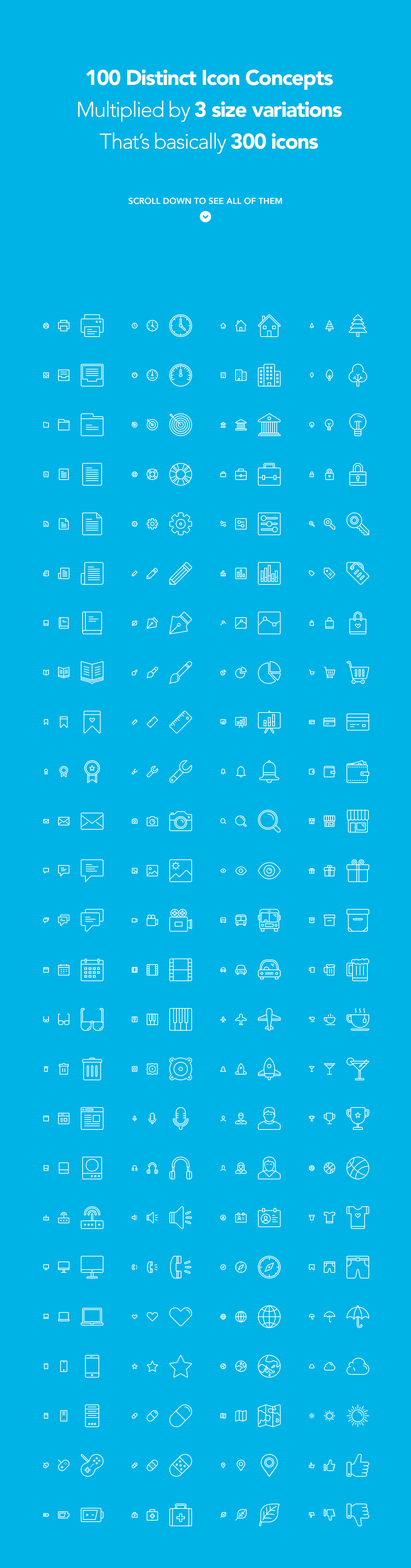
<style>
.page{position:relative;width:411px;height:1568px;background:#00b3e7}
.page>*{position:absolute;margin:0}
.t1{font:21.2px/31.9px "Avenir-Black";letter-spacing:-0.04em;color:#ffffff}
.t2{font:21.2px/31.9px "Avenir-Light";letter-spacing:-0.04em;color:#ffffff}
.t3{font:8.5px "Avenir-Heavy";color:#ffffff;text-transform:uppercase}
</style>
<div class="page">
<p class="t1" style="left:78px;top:69px;width:264px;height:85px;text-align:center">100 Distinct Icon Concepts<br><span class="t2">Multiplied by </span>3 size variations<br><span class="t2">That’s basically </span>300 icons</p>
<p class="t3" style="left:128px;top:198px;width:154px;height:6px">Scroll down to see all of them</p>
</div>
